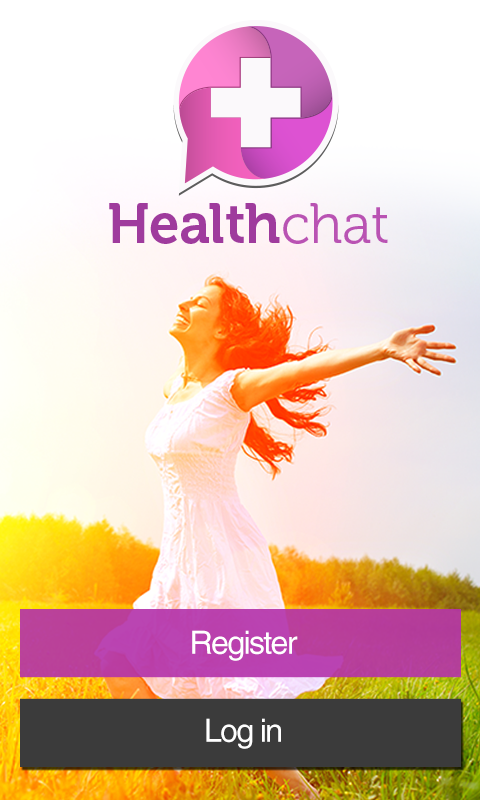
<style>
.page{position:relative;width:480px;height:800px}
.page>*{position:absolute;margin:0}
.t1{font:32px "Helvetica";letter-spacing:-0.05em;color:#ffffff}
</style>
<div class="page">
<p class="t1" style="left:192px;top:630px;width:106px;height:31px">Register</p>
<p class="t1" style="left:206px;top:718px;width:75px;height:31px">Log in</p>
</div>
